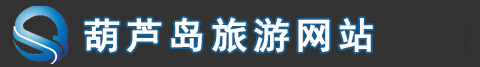
<style>
.page{position:relative;width:480px;height:67px;background:#333333}
.page>*{position:absolute;margin:0}
.t1{font:36px "SimHei";letter-spacing:0.15em;color:#ffffff;font-weight:bold}
</style>
<div class="page">
<p class="t1" style="left:84px;top:17px;width:289px;height:36px">葫芦岛旅游网站</p>
</div>
